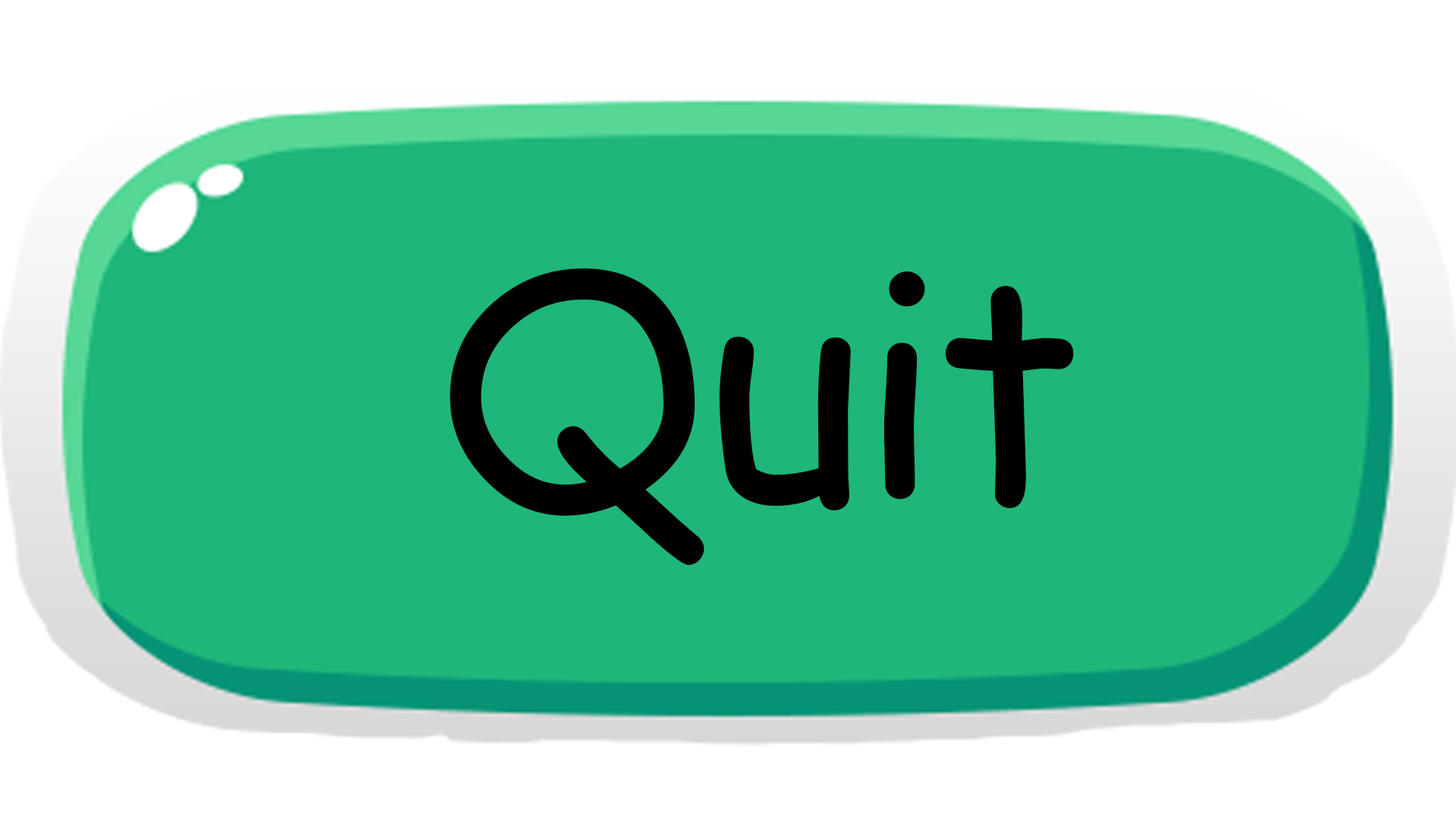
<style>
.page{position:relative;width:1456px;height:819px;background:#1fb67a}
.page>*{position:absolute;margin:0}
.t1{font:310.7px "ComicSansMS";letter-spacing:-0.025em;color:#000000}
</style>
<div class="page">
<p class="t1" style="left:450px;top:268px;width:624px;height:297px">Quit</p>
</div>
